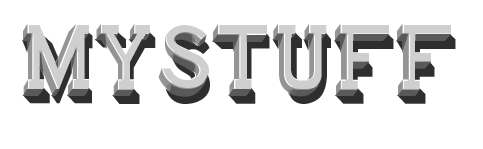
<style>
.page{position:relative;width:483px;height:149px;background:#ffffff}
.page>*{position:absolute;margin:0}
.t1{font:96px "Monstre-CastShadow";color:#2e2e2e}
.t2{font:96px "Monstre-CoreShadow";color:#5a5959}
</style>
<div class="page">
<p class="t1" style="left:22px;top:32px;width:434px;height:72px">mystuff</p>
<p class="t2" style="left:22px;top:33px;width:429px;height:64px">mystuff</p>
</div>
